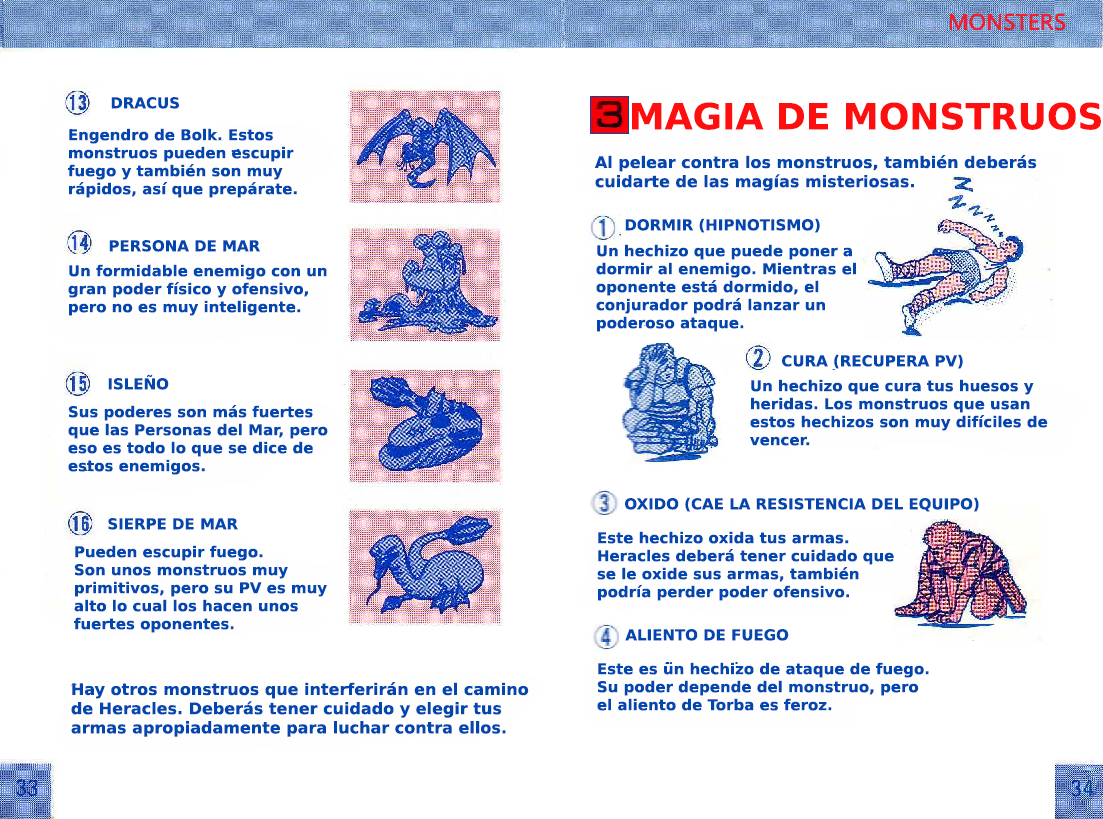
<style>
.page{position:relative;width:1103px;height:819px;background:#ffffff}
.page>*{position:absolute;margin:0}
.t1{font:15px "PrimaSansBT-Bold";color:#0247af}
.t2{font:36px "PrimaSansBT-Bold";color:#ff0e0f}
.t3{font:16px "PrimaSansBT-Bold";color:#0247af}
</style>
<div class="page">
<p class="t1" style="left:111px;top:97px;width:68px;height:12px">DRACUS</p>
<p class="t2" style="left:632px;top:102px;width:469px;height:28px">MAGIA DE MONSTRUOS</p>
<p class="t1" style="left:68px;top:128px;width:229px;height:70px">Engendro de Bolk. Estos<br>monstruos pueden escupir<br>fuego y también son muy<br>rápidos, así que prepárate.</p>
<p class="t3" style="left:594px;top:155px;width:443px;height:36px">Al pelear contra los monstruos, también deberás<br>cuidarte de las magías misteriosas.</p>
<p class="t1" style="left:625px;top:218px;width:195px;height:15px">DORMIR (HIPNOTISMO)</p>
<p class="t1" style="left:109px;top:240px;width:151px;height:12px">PERSONA DE MAR</p>
<p class="t1" style="left:596px;top:244px;width:260px;height:88px">Un hechizo que puede poner a <br>dormir al enemigo. Mientras el oponente está dormido, el <br>conjurador podrá lanzar un <br>poderoso ataque.</p>
<p class="t1" style="left:68px;top:264px;width:259px;height:52px">Un formidable enemigo con un<br>gran poder físico y ofensivo, <br>pero no es muy inteligente.</p>
<p class="t1" style="left:782px;top:354px;width:181px;height:15px">CURA (RECUPERA PV)</p>
<p class="t1" style="left:108px;top:374px;width:61px;height:16px">ISLEÑO</p>
<p class="t1" style="left:750px;top:379px;width:298px;height:67px">Un hechizo que cura tus huesos y heridas. Los monstruos que usan <br>estos hechizos son muy difíciles de<br>vencer.</p>
<p class="t1" style="left:68px;top:405px;width:260px;height:70px">Sus poderes son más fuertes <br>que las Personas del Mar, pero <br>eso es todo lo que se dice de <br>estos enemigos.</p>
<p class="t1" style="left:625px;top:497px;width:354px;height:15px">OXIDO (CAE LA RESISTENCIA DEL EQUIPO)</p>
<p class="t1" style="left:108px;top:518px;width:130px;height:12px">SIERPE DE MAR</p>
<p class="t1" style="left:597px;top:531px;width:297px;height:70px">Este hechizo oxida tus armas.<br>Heracles deberá tener cuidado que<br>se le oxide sus armas, también <br>podría perder poder ofensivo.</p>
<p class="t1" style="left:74px;top:545px;width:253px;height:88px">Pueden escupir fuego.<br>Son unos monstruos muy primitivos, pero su PV es muy<br>alto lo cual los hacen unos <br>fuertes oponentes.</p>
<p class="t1" style="left:625px;top:629px;width:164px;height:12px">ALIENTO DE FUEGO</p>
<p class="t1" style="left:597px;top:662px;width:332px;height:49px">Este es un hechizo de ataque de fuego. Su poder depende del monstruo, pero el aliento de Torba es feroz.</p>
<p class="t3" style="left:71px;top:682px;width:458px;height:55px">Hay otros monstruos que interferirán en el camino de Heracles. Deberás tener cuidado y elegir tus armas apropiadamente para luchar contra ellos.</p>
</div>
